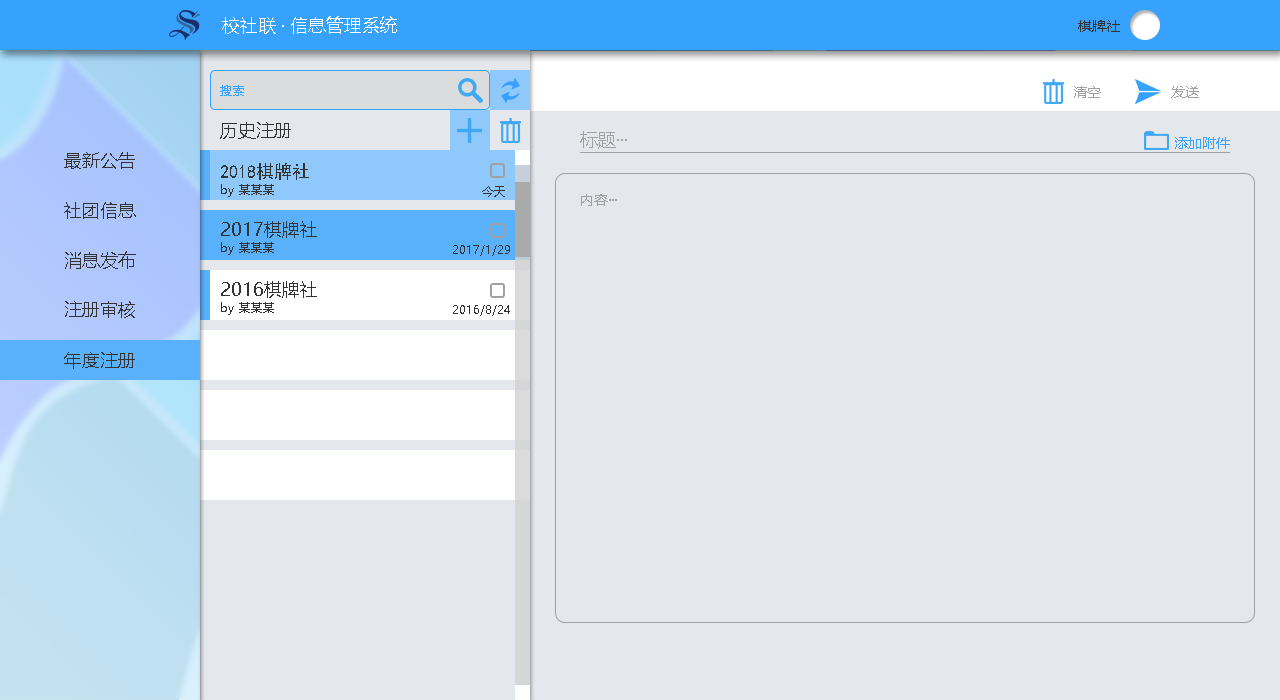
<style>
.page{position:relative;width:1280px;height:700px;background:#e4e8ec}
.page>*{position:absolute;margin:0}
.t1{font:18px "MicrosoftYaHei";color:#ffffff}
.t2{font:14px "MicrosoftYaHei";color:#333333}
.t3{font:12px "MicrosoftYaHei";color:#37a2fe}
.t4{font:14px "MicrosoftYaHei";color:#a0a0a0}
.t5{font:18px "MicrosoftYaHei";color:#333333}
.t6{font:18px "MicrosoftYaHei";color:#a0a0a0}
.t7{font:14px "MicrosoftYaHei";color:#37a2fe}
.t8{font:18px "SimHei";color:#333333}
.t9{font:12px "MicrosoftYaHei";color:#333333}
</style>
<div class="page">
<p class="t1" style="left:222px;top:16px;width:175px;height:18px">校社联 · 信息管理系统</p>
<p class="t2" style="left:1078px;top:20px;width:42px;height:12px">棋牌社</p>
<p class="t3" style="left:220px;top:85px;width:24px;height:11px">搜索</p>
<p class="t4" style="left:1074px;top:86px;width:27px;height:12px">清空</p>
<p class="t4" style="left:1171px;top:86px;width:28px;height:12px">发送</p>
<p class="t5" style="left:220px;top:122px;width:71px;height:17px">历史注册</p>
<p class="t6" style="left:580px;top:131px;width:47px;height:18px">标题···</p>
<p class="t7" style="left:1175px;top:137px;width:55px;height:12px">添加附件</p>
<p class="t5" style="left:64px;top:152px;width:71px;height:17px">最新公告</p>
<p class="t8" style="left:221px;top:163px;width:88px;height:17px">2018棋牌社</p>
<p class="t9" style="left:221px;top:184px;width:53px;height:13px">by 某某某</p>
<p class="t9" style="left:482px;top:186px;width:23px;height:11px">今天</p>
<p class="t4" style="left:581px;top:194px;width:36px;height:12px">内容···</p>
<p class="t5" style="left:64px;top:202px;width:72px;height:17px">社团信息</p>
<p class="t5" style="left:221px;top:221px;width:96px;height:17px">2017棋牌社</p>
<p class="t9" style="left:221px;top:242px;width:53px;height:13px">by 某某某</p>
<p class="t9" style="left:453px;top:245px;width:57px;height:11px">2017/1/29</p>
<p class="t5" style="left:65px;top:251px;width:71px;height:18px">消息发布</p>
<p class="t5" style="left:221px;top:281px;width:96px;height:17px">2016棋牌社</p>
<p class="t5" style="left:65px;top:301px;width:70px;height:17px">注册审核</p>
<p class="t9" style="left:221px;top:302px;width:53px;height:13px">by 某某某</p>
<p class="t9" style="left:453px;top:305px;width:57px;height:11px">2016/8/24</p>
<p class="t5" style="left:64px;top:352px;width:71px;height:17px">年度注册</p>
</div>
